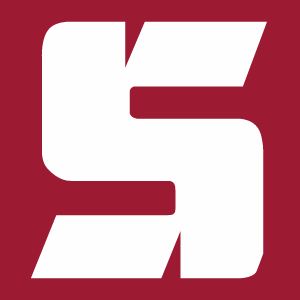
<style>
.page{position:relative;width:300px;height:300px;background:#fefefe}
.page>*{position:absolute;margin:0}
.t1{font:356.3px "UltraSerifSF";color:#fefefe}
</style>
<div class="page">
<p class="t1" style="left:31px;top:21px;width:236px;height:258px">S</p>
</div>
